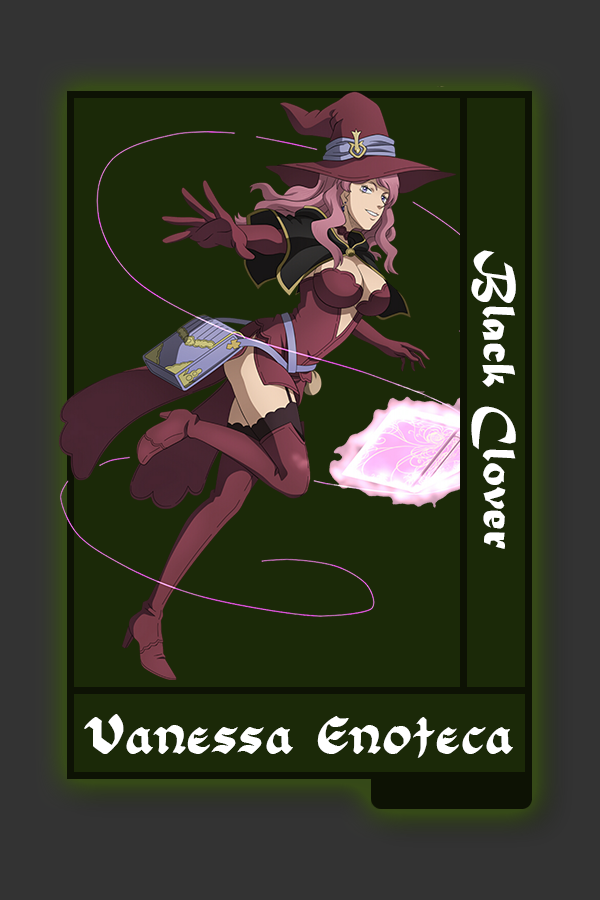
<style>
.page{position:relative;width:600px;height:900px;background:#1b2908}
.page>*{position:absolute;margin:0}
.t1{font:48.8px "MaturaMTScriptCapitals";color:#ffffff}
.t2{font:44.9px "FloranteatLaura";color:#ffffff}
</style>
<div class="page">
<p class="t1" style="left:471px;top:250px;width:45px;height:299px;rotate:90deg">Black Clover</p>
<p class="t2" style="left:84px;top:714px;width:429px;height:44px">Vanessa Enoteca</p>
</div>
